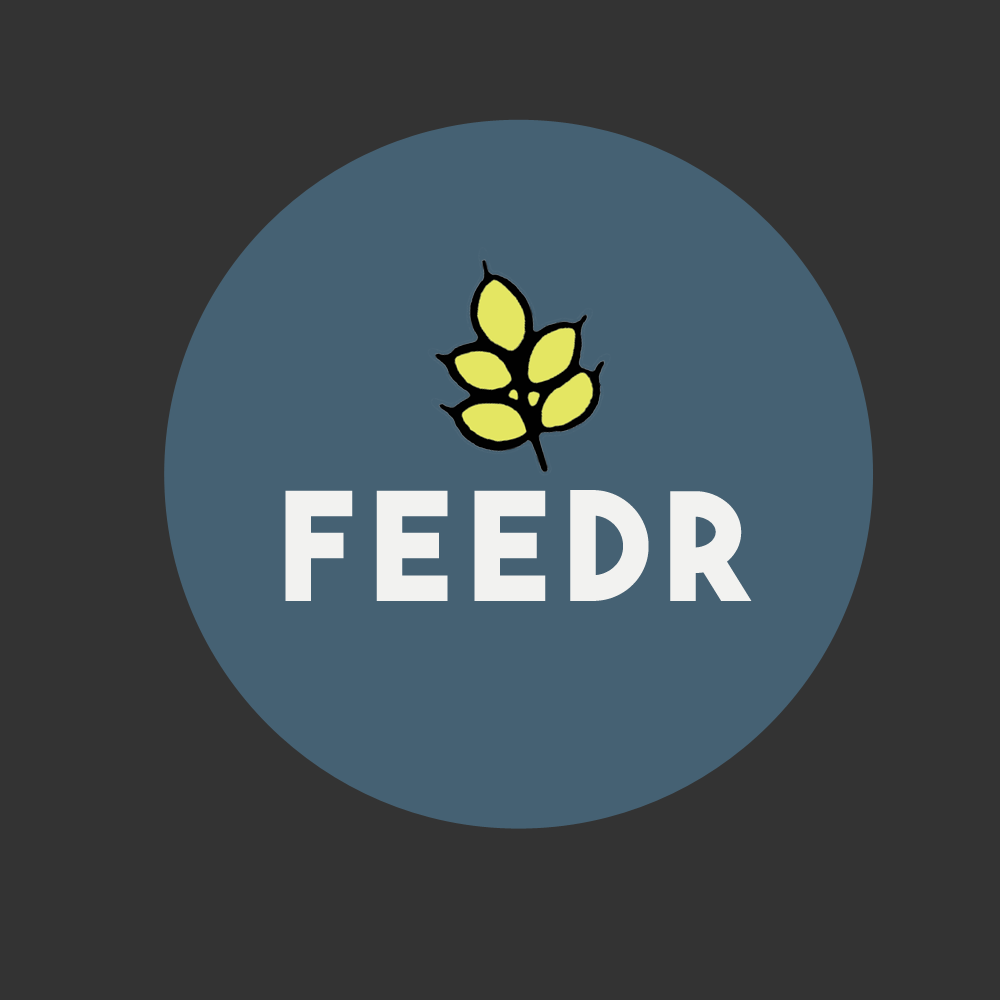
<style>
.page{position:relative;width:1000px;height:1000px;background:#333333}
.page>*{position:absolute;margin:0}
.t1{font:150px "TheBoldFont";letter-spacing:0.105em;color:#f2f2f0}
</style>
<div class="page">
<p class="t1" style="left:285px;top:490px;width:467px;height:111px">FEEDR</p>
</div>
